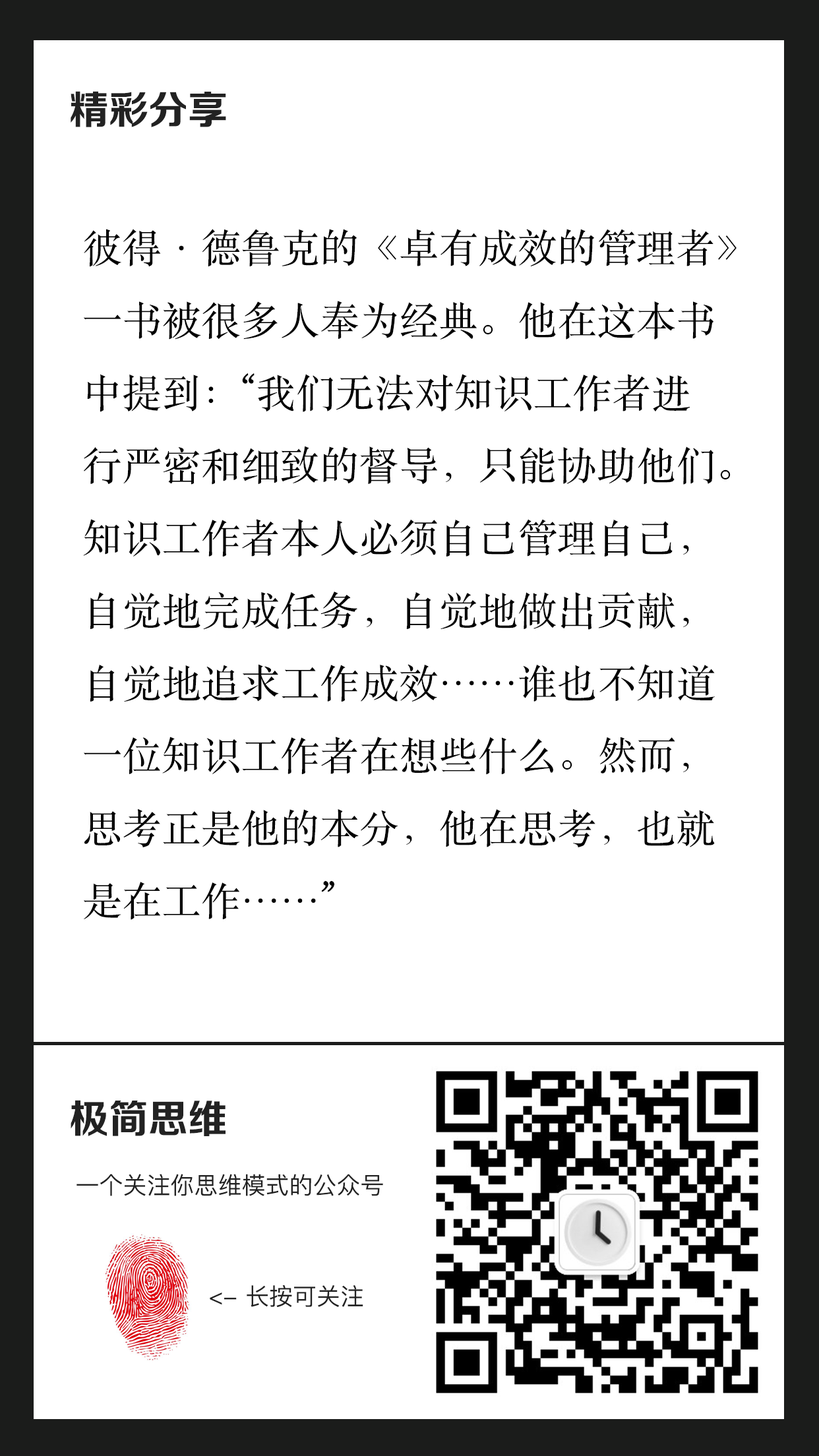
<style>
.page{position:relative;width:819px;height:1456px;background:#ffffff}
.page>*{position:absolute;margin:0}
.t1{font:39.6px "FZZCHJW--GB1-0";color:#222222}
.t2{font:39.6px/72.5px "STSongti-SC-Regular";color:#000000}
.t3{font:23.7px "PingFangSC-Regular";color:#222222}
</style>
<div class="page">
<p class="t1" style="left:71px;top:91px;width:155px;height:36px">精彩分享</p>
<p class="t2" style="left:83px;top:229px;width:654px;height:691px">彼得·德鲁克的《卓有成效的管理者》<br>一书被很多人奉为经典。他在这本书<br>中提到：“我们无法对知识工作者进<br>行严密和细致的督导，只能协助他们。<br>知识工作者本人必须自己管理自己，<br>自觉地完成任务，自觉地做出贡献，<br>自觉地追求工作成效……谁也不知道<br>一位知识工作者在想些什么。然而，<br>思考正是他的本分，他在思考，也就<br>是在工作……”</p>
<p class="t1" style="left:71px;top:1100px;width:155px;height:36px">极简思维</p>
<p class="t3" style="left:76px;top:1174px;width:307px;height:22px">一个关注你思维模式的公众号</p>
<p class="t3" style="left:210px;top:1285px;width:153px;height:23px">&lt;- 长按可关注</p>
</div>
